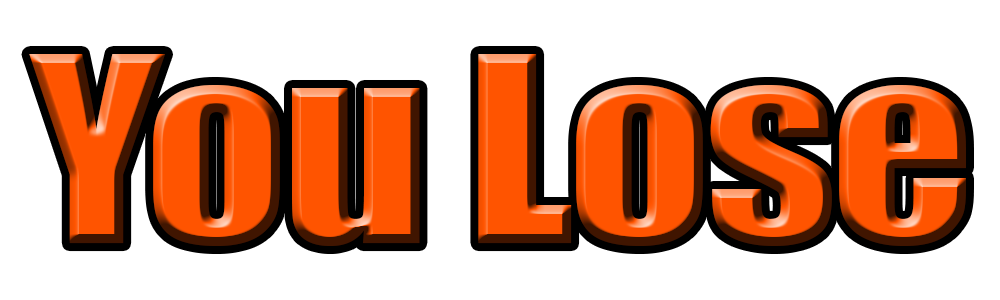
<style>
.page{position:relative;width:1000px;height:300px;background:#ffffff}
.page>*{position:absolute;margin:0}
.t1{font:239px "Impact";letter-spacing:-0.02em;scale:1.17 1}
</style>
<div class="page">
<p class="t1" style="left:29px;top:54px;width:937px;height:192px">You Lose</p>
</div>
